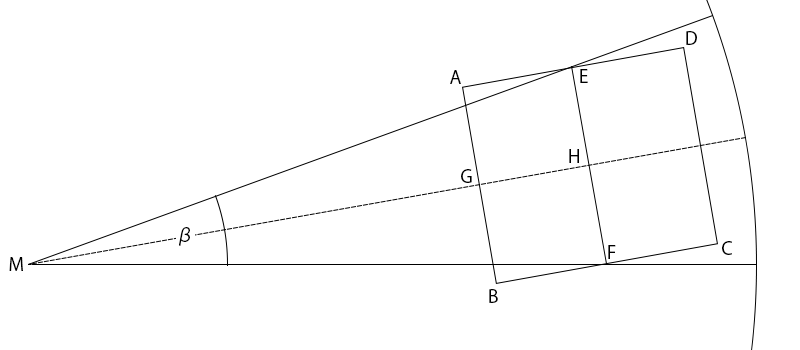
<style>
.page{position:relative;width:800px;height:350px;background:#ffffff}
.page>*{position:absolute;margin:0}
.t1{font:18px "KozGoPr6N-Regular";color:#000000}
</style>
<div class="page">
<p class="t1" style="left:686px;top:31px;width:11px;height:14px">D</p>
<p class="t1" style="left:450px;top:70px;width:11px;height:14px">A</p>
<p class="t1" style="left:580px;top:69px;width:8px;height:14px">E</p>
<p class="t1" style="left:569px;top:149px;width:10px;height:14px">H</p>
<p class="t1" style="left:461px;top:169px;width:11px;height:14px">G</p>
<p class="t1" style="left:179px;top:227px;width:11px;height:19px">β</p>
<p class="t1" style="left:608px;top:245px;width:8px;height:14px">F</p>
<p class="t1" style="left:722px;top:241px;width:10px;height:14px">C</p>
<p class="t1" style="left:9px;top:257px;width:14px;height:14px">M</p>
<p class="t1" style="left:489px;top:289px;width:9px;height:14px">B</p>
</div>
